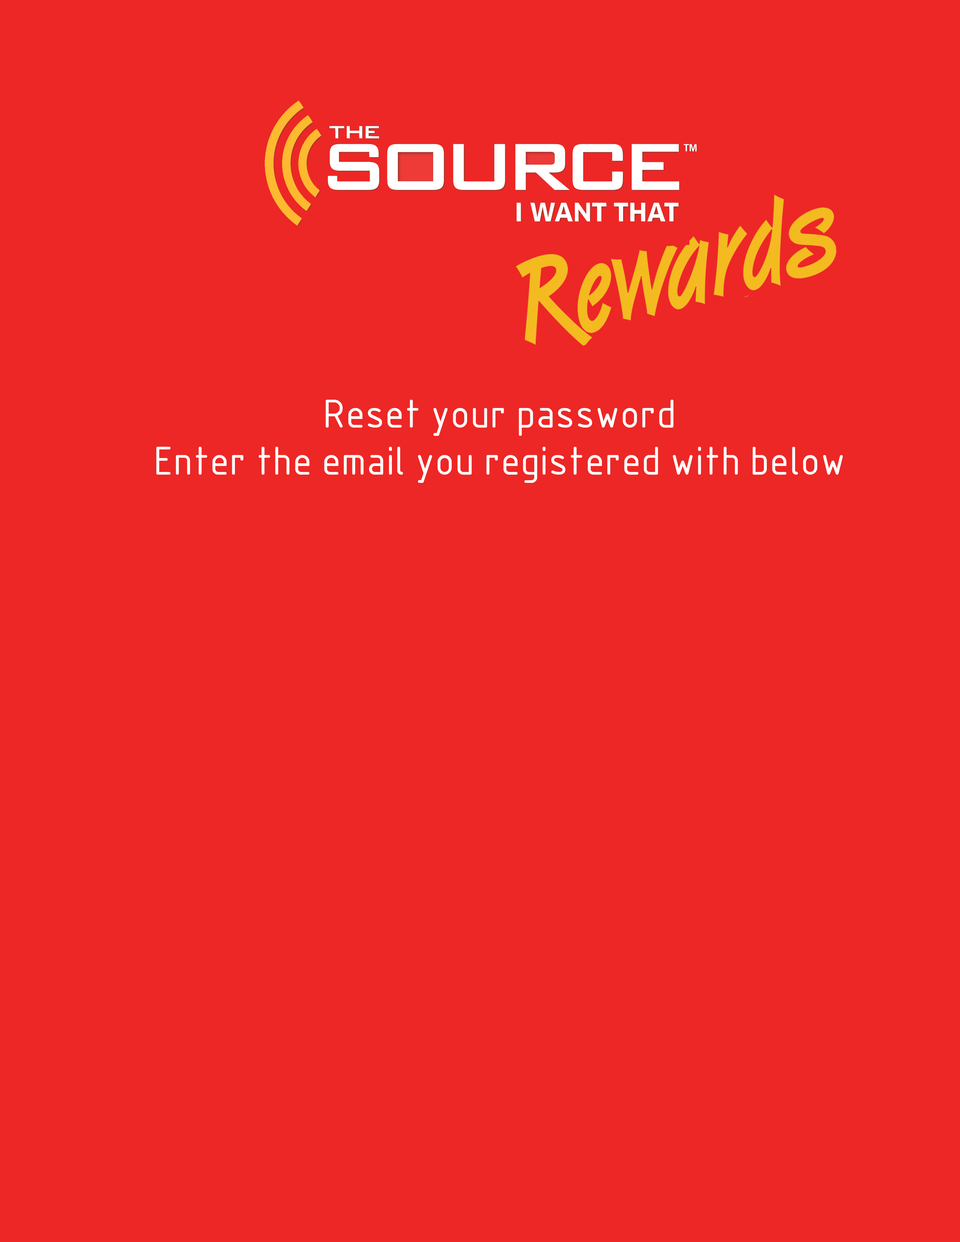
<style>
.page{position:relative;width:960px;height:1242px;background:#ed2725}
.page>*{position:absolute;margin:0}
.t1{font:39.2px "GOST-Common";color:#ffffff}
</style>
<div class="page">
<p class="t1" style="left:156px;top:400px;width:687px;height:83px;text-align:center">Reset your password<br>Enter the email you registered with below</p>
</div>
